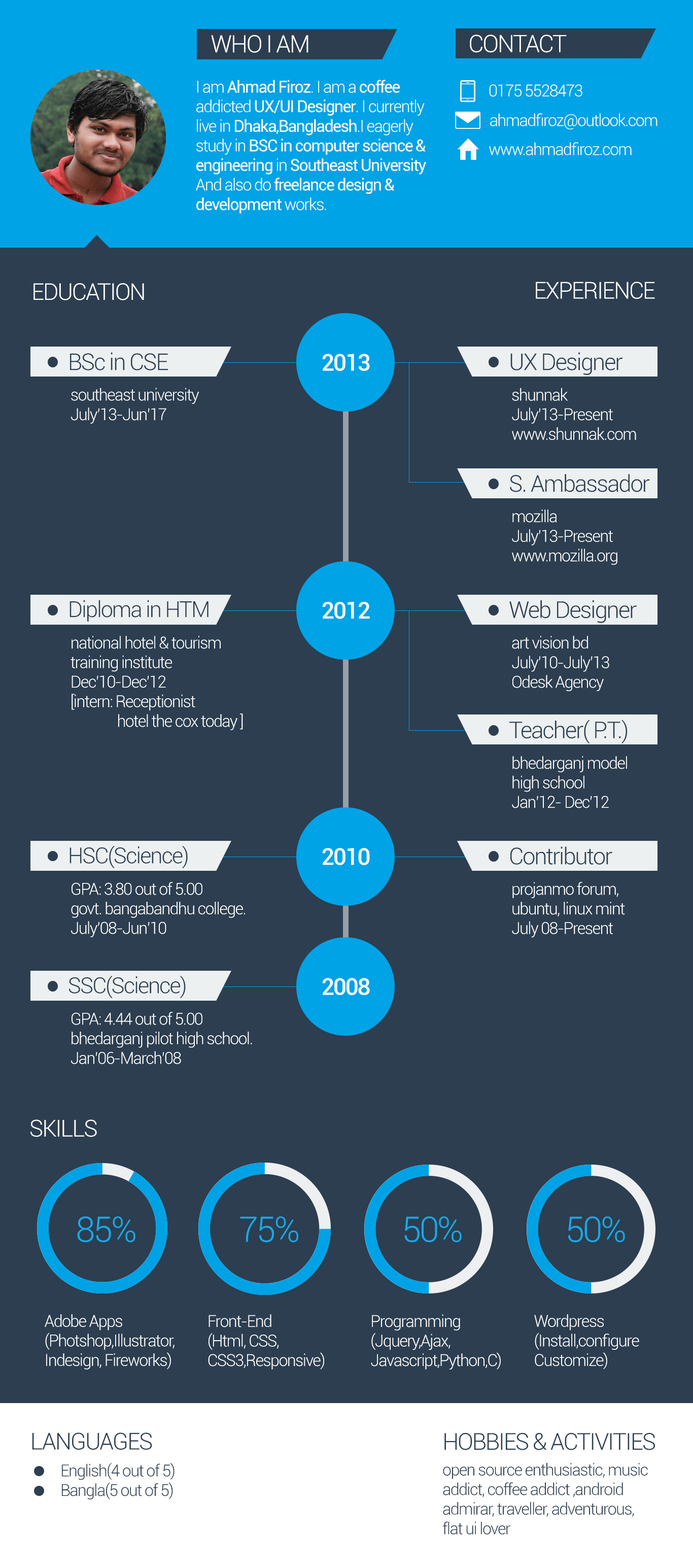
<style>
.page{position:relative;width:693px;height:1568px;background:#2c3e50}
.page>*{position:absolute;margin:0}
.t1{font:24.1px "Roboto-Light";letter-spacing:-0.05em;color:#ffffff}
.t2{font:24.1px "Roboto-Light";letter-spacing:-0.05em;color:#ffffff;text-transform:uppercase}
.t3{font:16.3px "Roboto-Regular";letter-spacing:-0.05em;color:#ffffff}
.t4{font:16.3px "Roboto-Light";letter-spacing:-0.05em;color:#ffffff}
.t5{font:16.2px "Roboto-Light";letter-spacing:-0.05em;color:#ffffff}
.t6{font:23.3px "Roboto-Light";letter-spacing:-0.05em;color:#ffffff;text-transform:uppercase}
.t7{font:23.3px "Roboto-Light";letter-spacing:-0.05em;color:#ffffff}
.t8{font:23.2px "Roboto-Light";letter-spacing:-0.05em;color:#2c3e50}
.t9{font:23.2px "Roboto-Medium";letter-spacing:-0.05em;color:#ffffff;text-transform:uppercase}
.t10{font:22.1px "Roboto-Light";letter-spacing:-0.05em;color:#2c3e50}
.t11{font:35.2px "Roboto-Light";letter-spacing:-0.05em;color:#17aae8;text-transform:uppercase}
.t12{font:35.3px "Roboto-Light";letter-spacing:-0.05em;color:#17aae8;text-transform:uppercase}
.t13{font:16.3px "Roboto-Light";letter-spacing:-0.05em;color:#fefefe}
.t14{font:23.3px "Roboto-Light";letter-spacing:-0.05em;color:#2c3e50;text-transform:uppercase}
.t15{font:16.3px "Roboto-Light";letter-spacing:-0.05em;color:#2c3e50}
</style>
<div class="page">
<p class="t1" style="left:211px;top:35px;width:98px;height:18px">WHO I AM</p>
<p class="t2" style="left:470px;top:35px;width:97px;height:18px">contact</p>
<p class="t3" style="left:196px;top:80px;width:230px;height:134px"><span class="t4">I am </span>Ahmad Firoz<span class="t4">. I am a </span>coffee<span class="t4"> <br>addicted </span>UX/UI Designer<span class="t4">. I currently live in </span>Dhaka,Bangladesh<span class="t4">.I eagerly study in </span>BSC in computer science &amp; engineering<span class="t4"> in </span>Southeast University <span class="t4">And also do </span>freelance design &amp; <br>development<span class="t4"> works.</span></p>
<p class="t4" style="left:489px;top:84px;width:94px;height:13px">0175 5528473</p>
<p class="t5" style="left:490px;top:113px;width:168px;height:16px">ahmadfiroz@outlook.com</p>
<p class="t4" style="left:489px;top:142px;width:143px;height:13px">www.ahmadfiroz.com</p>
<p class="t6" style="left:536px;top:282px;width:119px;height:17px">Experience</p>
<p class="t7" style="left:33px;top:283px;width:111px;height:17px">EDUCATION</p>
<p class="t8" style="left:70px;top:352px;width:98px;height:18px">BSc in CSE</p>
<p class="t9" style="left:322px;top:354px;width:48px;height:17px">2013</p>
<p class="t8" style="left:510px;top:352px;width:113px;height:23px">UX Designer</p>
<p class="t4" style="left:71px;top:388px;width:128px;height:36px;text-align:justify">southeast university<br>July’13-Jun’17</p>
<p class="t4" style="left:512px;top:388px;width:124px;height:52px;text-align:justify">shunnak<br>July’13-Present<br>www.shunnak.com</p>
<p class="t8" style="left:510px;top:474px;width:140px;height:18px">S. Ambassador</p>
<p class="t4" style="left:512px;top:509px;width:106px;height:56px;text-align:justify">mozilla<br>July’13-Present<br>www.mozilla.org</p>
<p class="t10" style="left:70px;top:600px;width:139px;height:22px">Diploma in HTM</p>
<p class="t9" style="left:322px;top:602px;width:48px;height:17px">2012</p>
<p class="t8" style="left:509px;top:600px;width:128px;height:23px">Web Designer</p>
<p class="t4" style="left:71px;top:636px;width:172px;height:94px;text-align:justify">national hotel &amp; tourism<br>training institute<br>Dec’10-Dec’12<br>[intern: Receptionist<br>      hotel the cox today ]</p>
<p class="t4" style="left:512px;top:636px;width:97px;height:55px;text-align:justify">art vision bd<br>July’10-July’13<br>Odesk Agency</p>
<p class="t8" style="left:509px;top:720px;width:119px;height:23px">Teacher( P.T.)</p>
<p class="t4" style="left:512px;top:756px;width:115px;height:52px;text-align:justify">bhedarganj model<br>high school<br>Jan’12- Dec’12</p>
<p class="t10" style="left:70px;top:845px;width:118px;height:23px">HSC(Science)</p>
<p class="t9" style="left:322px;top:848px;width:48px;height:17px">2010</p>
<p class="t8" style="left:510px;top:846px;width:102px;height:19px">Contributor</p>
<p class="t4" style="left:71px;top:882px;width:174px;height:55px;text-align:justify">GPA: 3.80 out of 5.00<br>govt. bangabandhu college.<br>July’08-Jun’10</p>
<p class="t4" style="left:512px;top:882px;width:113px;height:56px;text-align:justify">projanmo forum,<br>ubuntu, linux mint<br>July 08-Present</p>
<p class="t10" style="left:69px;top:975px;width:117px;height:23px">SSC(Science)</p>
<p class="t9" style="left:322px;top:978px;width:48px;height:17px">2008</p>
<p class="t4" style="left:71px;top:1012px;width:181px;height:52px;text-align:justify">GPA: 4.44 out of 5.00<br>bhedarganj pilot high school.<br>Jan’06-March’08</p>
<p class="t6" style="left:30px;top:1119px;width:67px;height:18px">SKIlls</p>
<p class="t11" style="left:77px;top:1216px;width:58px;height:26px">85%</p>
<p class="t12" style="left:240px;top:1216px;width:58px;height:26px">75%</p>
<p class="t12" style="left:404px;top:1216px;width:58px;height:26px">50%</p>
<p class="t11" style="left:568px;top:1216px;width:57px;height:26px">50%</p>
<p class="t4" style="left:45px;top:1314px;width:130px;height:56px;text-align:justify">Adobe Apps<br>(Photshop,Illustrator,<br>Indesign, Fireworks)</p>
<p class="t13" style="left:208px;top:1314px;width:116px;height:56px;text-align:justify">Front-End <br>(Html, CSS,<br>CSS3,Responsive)</p>
<p class="t4" style="left:371px;top:1314px;width:130px;height:56px;text-align:justify">Programming<br>(Jquery,Ajax,<br>Javascript,Python,C)</p>
<p class="t13" style="left:534px;top:1314px;width:105px;height:56px;text-align:justify">Wordpress<br>(Install,configure<br>Customize)</p>
<p class="t14" style="left:32px;top:1433px;width:120px;height:17px">LanGuages</p>
<p class="t14" style="left:445px;top:1433px;width:210px;height:17px">Hobbies &amp; ActIvities</p>
<p class="t15" style="left:62px;top:1463px;width:113px;height:36px;text-align:justify">English(4 out of 5)<br>Bangla(5 out of 5)</p>
<p class="t15" style="left:443px;top:1463px;width:205px;height:72px;text-align:justify">open source enthusiastic, music<br>addict, coffee addict ,android <br>admirar, traveller, adventurous,<br>flat ui lover</p>
</div>
